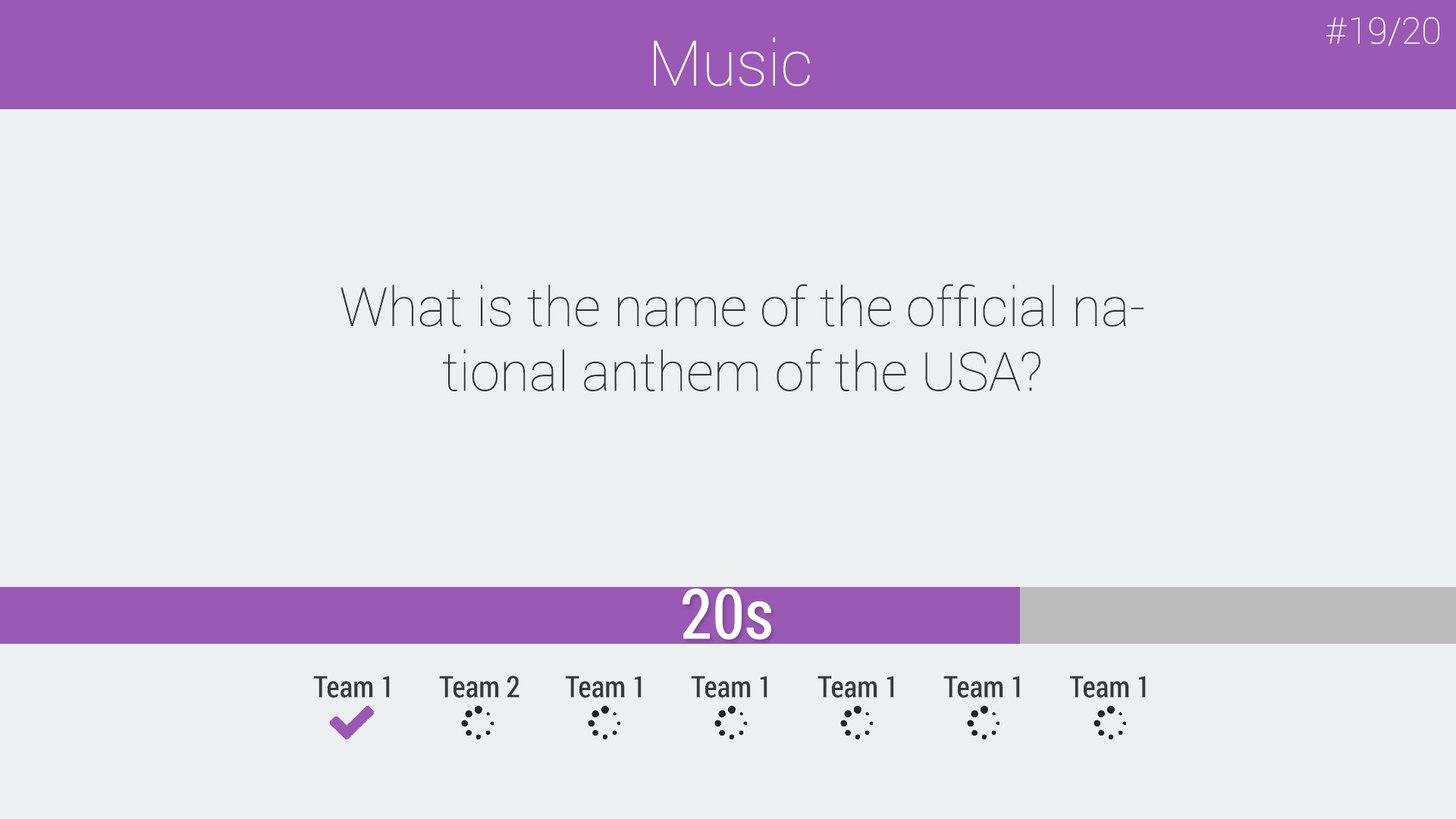
<style>
.page{position:relative;width:1456px;height:819px;background:#ecf0f1}
.page>*{position:absolute;margin:0}
.t1{font:36.4px "Roboto-Thin";color:#fefefe}
.t2{font:62.6px "Roboto-Thin";color:#fefefe}
.t3{font:53.9px "Roboto-Thin";color:#333333}
.t4{font:69.3px "RobotoCondensed-Regular";color:#ffffff}
.t5{font:29.6px "RobotoCondensed-Regular";color:#393939}
</style>
<div class="page">
<p class="t1" style="left:1326px;top:17px;width:113px;height:29px">#19/20</p>
<p class="t2" style="left:654px;top:37px;width:156px;height:49px">Music</p>
<p class="t3" style="left:340px;top:284px;width:804px;height:107px;text-align:center">What is the name of the official national anthem of the USA?</p>
<p class="t4" style="left:682px;top:588px;width:89px;height:52px">20s</p>
<p class="t5" style="left:313px;top:676px;width:77px;height:22px">Team 1</p>
<p class="t5" style="left:439px;top:676px;width:80px;height:22px">Team 2</p>
<p class="t5" style="left:565px;top:676px;width:77px;height:22px">Team 1</p>
<p class="t5" style="left:691px;top:676px;width:76px;height:22px">Team 1</p>
<p class="t5" style="left:817px;top:676px;width:77px;height:22px">Team 1</p>
<p class="t5" style="left:943px;top:676px;width:77px;height:22px">Team 1</p>
<p class="t5" style="left:1069px;top:676px;width:77px;height:22px">Team 1</p>
</div>
